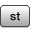
<style>
.page{position:relative;width:32px;height:32px;background:#ffffff}
.page>*{position:absolute;margin:0}
.t1{font:12px "HelveticaNeue-Medium";color:#000000}
</style>
<div class="page">
<p class="t1" style="left:10px;top:12px;width:10px;height:9px">st</p>
</div>
